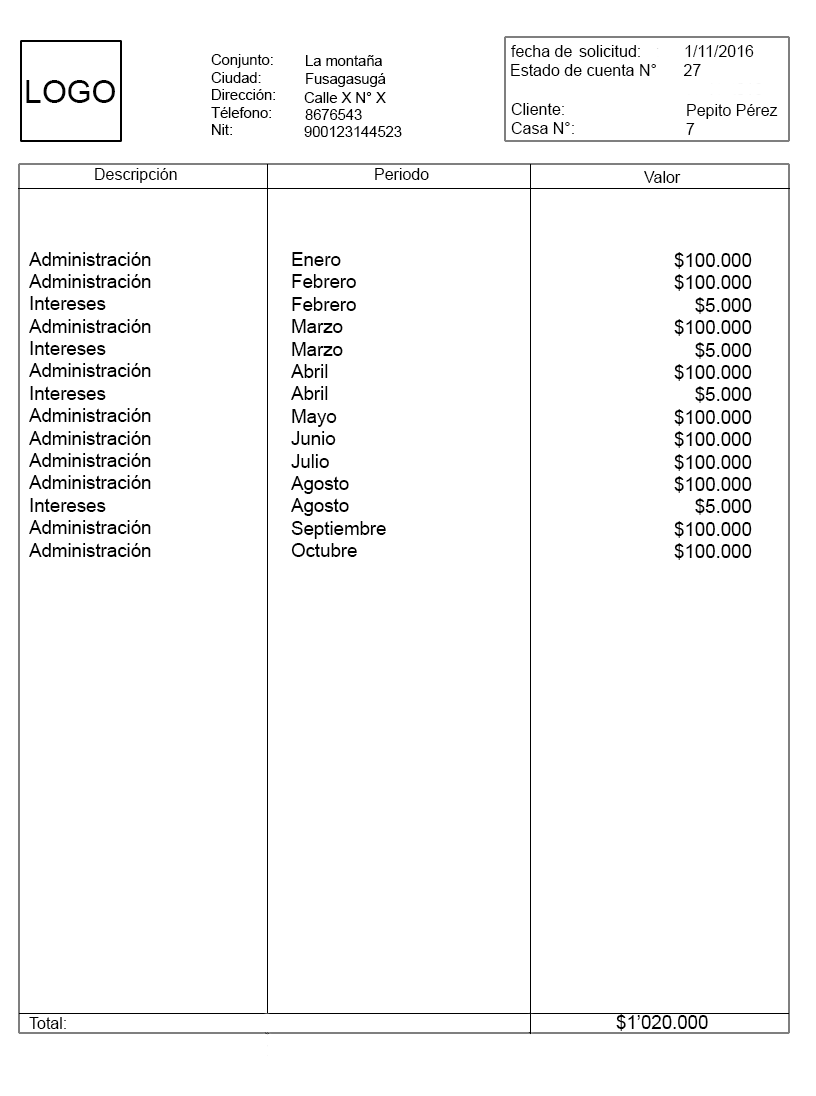
<style>
.page{position:relative;width:816px;height:1096px;background:#ffffff}
.page>*{position:absolute;margin:0}
.t1{font:16px "ArialMT";color:#000000}
.t2{font:12px "ArialMT";color:#000000}
.t3{font:18.7px "ArialMT";color:#000000}
</style>
<div class="page">
<p class="t1" style="left:579px;top:45px;width:61px;height:12px">solicitud:</p>
<p class="t2" style="left:511px;top:64px;width:190px;height:12px">Estado de cuenta N°      27</p>
<p class="t2" style="left:95px;top:168px;width:82px;height:15px">Descripción</p>
<p class="t2" style="left:375px;top:168px;width:54px;height:12px">Periodo</p>
<p class="t2" style="left:644px;top:171px;width:37px;height:12px">Valor</p>
<p class="t3" style="left:29px;top:252px;width:122px;height:305px">Administración<br>Administración<br>Intereses<br>Administración<br>Intereses<br>Administración<br>Intereses<br>Administración<br>Administración<br>Administración<br>Administración<br>Intereses<br>Administración<br>Administración</p>
<p class="t3" style="left:291px;top:252px;width:95px;height:305px">Enero<br>Febrero<br>Febrero<br>Marzo<br>Marzo<br>Abril<br>Abril<br>Mayo<br>Junio<br>Julio<br>Agosto<br>Agosto<br>Septiembre<br>Octubre</p>
<p class="t3" style="left:674px;top:252px;width:78px;height:308px">$100.000<br>$100.000<br>    $5.000<br>$100.000<br>    $5.000<br>$100.000<br>    $5.000<br>$100.000<br>$100.000<br>$100.000<br>$100.000<br>    $5.000<br>$100.000<br>$100.000</p>
<p class="t3" style="left:616px;top:1014px;width:92px;height:17px">$1’020.000</p>
<p class="t2" style="left:29px;top:1017px;width:37px;height:12px">Total:</p>
</div>
